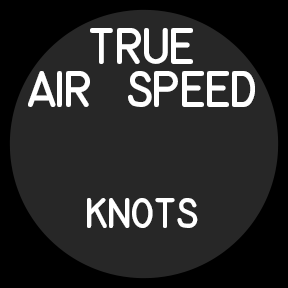
<style>
.page{position:relative;width:288px;height:288px;background:#272727}
.page>*{position:absolute;margin:0}
.t1{font:36px "MS-33558-Regular";letter-spacing:-0.04em;color:#ffffff}
.t2{font:30px "MS-33558-Regular";letter-spacing:-0.04em;color:#ffffff}
</style>
<div class="page">
<p class="t1" style="left:28px;top:28px;width:227px;height:79px;text-align:center">TRUE<br>AIR SPEED</p>
<p class="t2" style="left:87px;top:198px;width:111px;height:30px">KNOTS</p>
</div>
